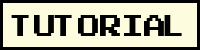
<style>
.page{position:relative;width:200px;height:50px;background:#fefcde}
.page>*{position:absolute;margin:0}
.t1{font:41.7px "ArcadeClassic";color:#000000;scale:0.95 1}
</style>
<div class="page">
<p class="t1" style="left:11px;top:15px;width:171px;height:21px">Tutorial</p>
</div>
